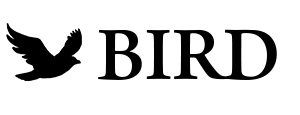
<style>
.page{position:relative;width:300px;height:115px;background:#ffffff}
.page>*{position:absolute;margin:0}
.t1{font:107.2px "AdobeNaskh-Medium";color:#010101}
</style>
<div class="page">
<p class="t1" style="left:98px;top:29px;width:179px;height:51px">BIRD</p>
</div>
